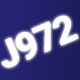
<style>
.page{position:relative;width:80px;height:80px}
.page>*{position:absolute;margin:0}
.t1{font:38px "Roboto-Black";letter-spacing:-0.04em;color:#ffffff}
</style>
<div class="page">
<p class="t1" style="left:1px;top:15px;width:78px;height:53px;rotate:-23deg">J972</p>
</div>
